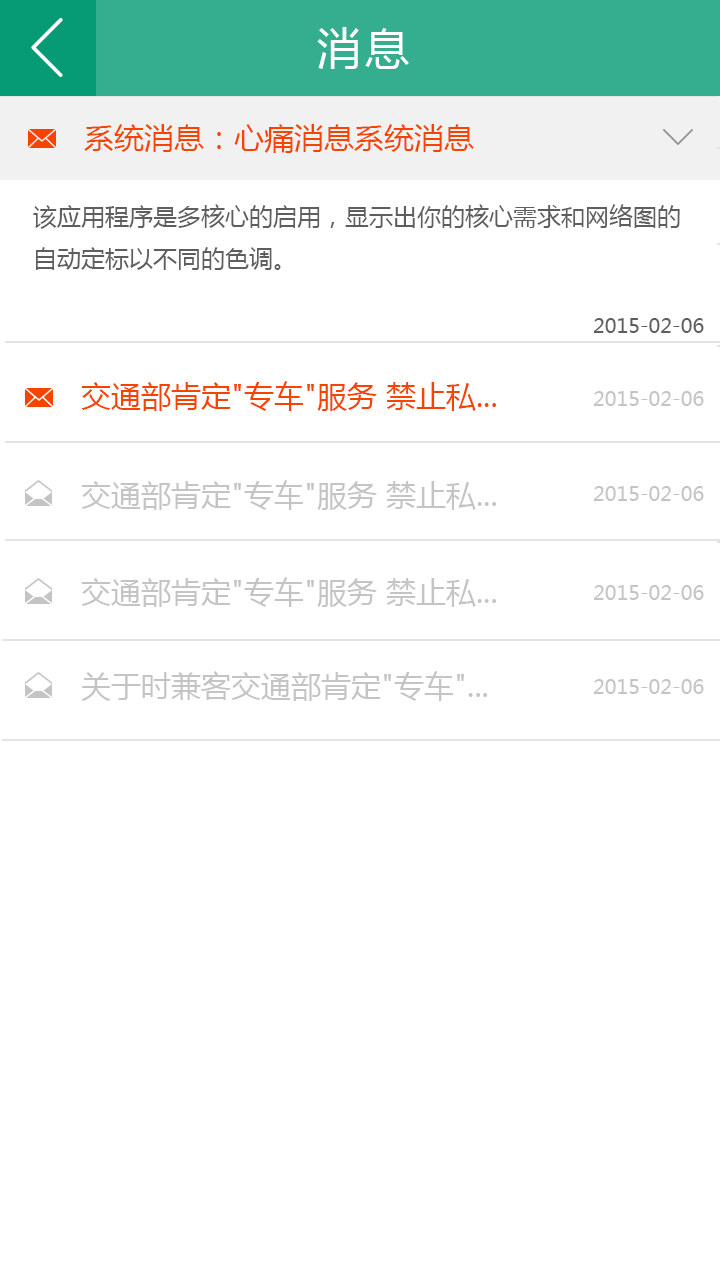
<style>
.page{position:relative;width:720px;height:1280px;background:#ffffff}
.page>*{position:absolute;margin:0}
.t1{font:44px "MicrosoftYaHei";letter-spacing:0.1em;color:#ffffff}
.t2{font:30px "MicrosoftYaHei";color:#f54400}
.t3{font:24px "MicrosoftYaHei";color:#5e5e5e}
.t4{font:20px "MicrosoftYaHei";color:#5e5e5e}
.t5{font:20px "MicrosoftYaHei";color:#c4c4c4}
.t6{font:30px "MicrosoftYaHei";color:#c4c4c4}
</style>
<div class="page">
<p class="t1" style="left:317px;top:27px;width:92px;height:42px">消息</p>
<p class="t2" style="left:84px;top:124px;width:390px;height:29px">系统消息：心痛消息系统消息</p>
<p class="t3" style="left:33px;top:204px;width:647px;height:66px">该应用程序是多核心的启用，显示出你的核心需求和网络图的自动定标以不同的色调。</p>
<p class="t4" style="left:593px;top:318px;width:111px;height:15px">2015-02-06</p>
<p class="t2" style="left:81px;top:381px;width:415px;height:30px">交通部肯定"专车"服务 禁止私...</p>
<p class="t5" style="left:593px;top:391px;width:111px;height:15px">2015-02-06</p>
<p class="t6" style="left:81px;top:480px;width:415px;height:30px">交通部肯定"专车"服务 禁止私...</p>
<p class="t5" style="left:593px;top:486px;width:111px;height:15px">2015-02-06</p>
<p class="t6" style="left:81px;top:577px;width:415px;height:30px">交通部肯定"专车"服务 禁止私...</p>
<p class="t5" style="left:593px;top:585px;width:111px;height:15px">2015-02-06</p>
<p class="t6" style="left:81px;top:671px;width:406px;height:30px">关于时兼客交通部肯定"专车"...</p>
<p class="t5" style="left:593px;top:679px;width:111px;height:15px">2015-02-06</p>
</div>
